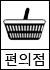
<style>
.page{position:relative;width:50px;height:70px;background:#ffffff}
.page>*{position:absolute;margin:0}
.t1{font:14px "MalgunGothicRegular";color:#000000}
</style>
<div class="page">
<p class="t1" style="left:5px;top:53px;width:39px;height:13px">편의점</p>
</div>
